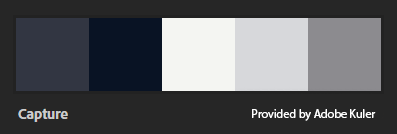
<style>
.page{position:relative;width:397px;height:134px;background:#262626}
.page>*{position:absolute;margin:0}
.t1{font:12px "MyriadPro-Regular";color:#ffffff}
</style>
<div class="page">
<p class="t1" style="left:252px;top:109px;width:124px;height:12px">Provided by Adobe Kuler</p>
</div>
